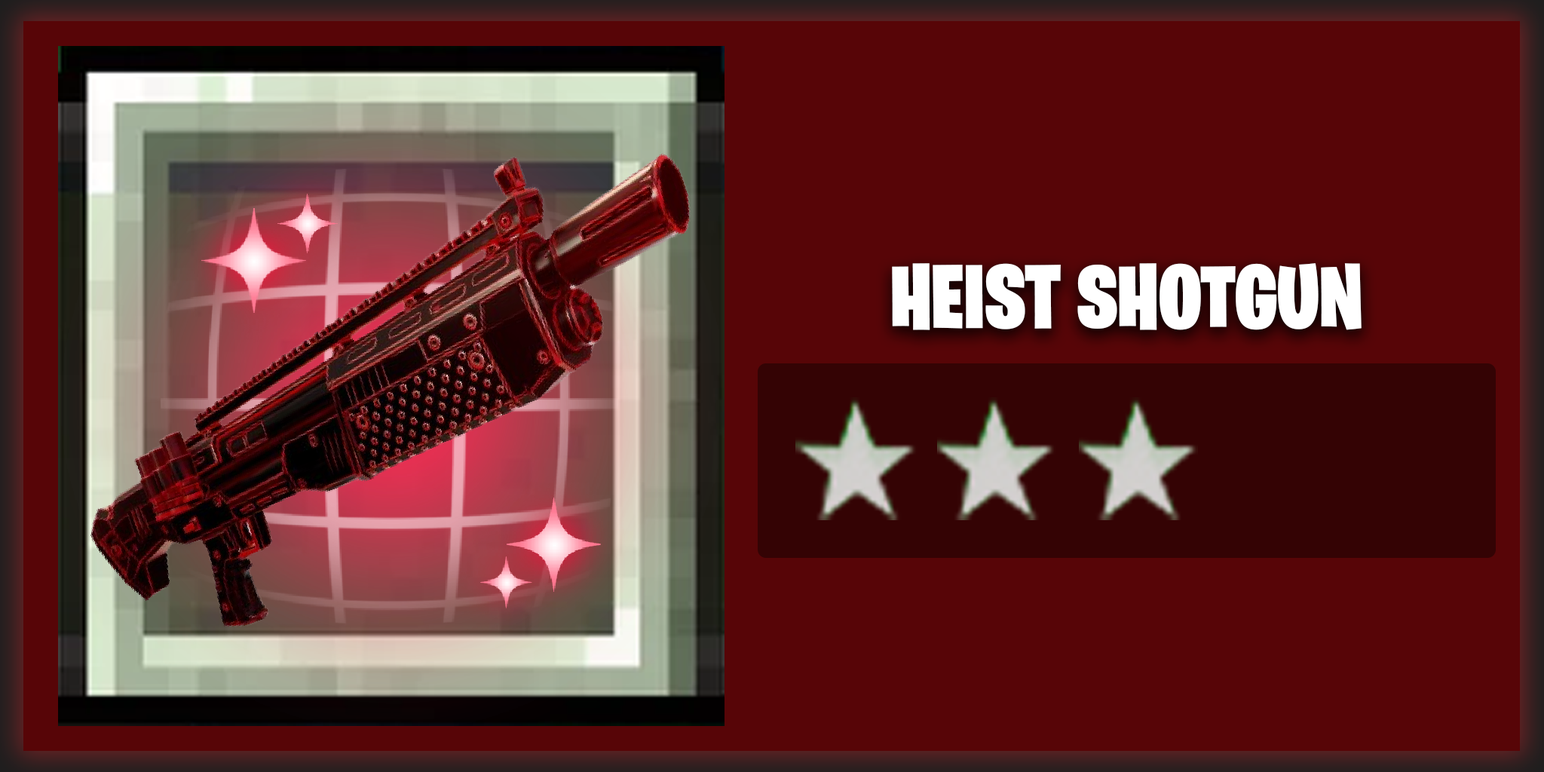
<style>
.page{position:relative;width:1544px;height:772px;background:#570507}
.page>*{position:absolute;margin:0}
.t1{font:90.5px "BurbankBigCondensed-Black";color:#ffffff}
</style>
<div class="page">
<p class="t1" style="left:892px;top:263px;width:470px;height:67px">HEIST SHOTGUN</p>
</div>
